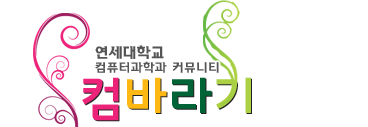
<style>
.page{position:relative;width:368px;height:127px;background:#ffffff}
.page>*{position:absolute;margin:0}
.t1{font:12px "YonseiLight";color:#555555}
.t2{font:14px "YonseiBold";color:#555555}
.t3{font:48px "InterGTB";color:#ed2279}
.t4{font:48px "InterGTB";color:#fdb813}
.t5{font:48px "InterGTB";color:#006436}
.t6{font:48px "InterGTB";color:#abd043}
.t7{font:48px "InterGTB"}
</style>
<div class="page">
<p class="t1" style="left:95px;top:45px;width:124px;height:28px"><span class="t2">연세대학교<br></span>컴퓨터과학과 커뮤니티</p>
<p class="t3" style="left:82px;top:77px;width:169px;height:44px">컴<span class="t4">바</span><span class="t5">라</span><span class="t6">기</span></p>
<p class="t7" style="left:83px;top:78px;width:169px;height:44px">컴바라기</p>
</div>
